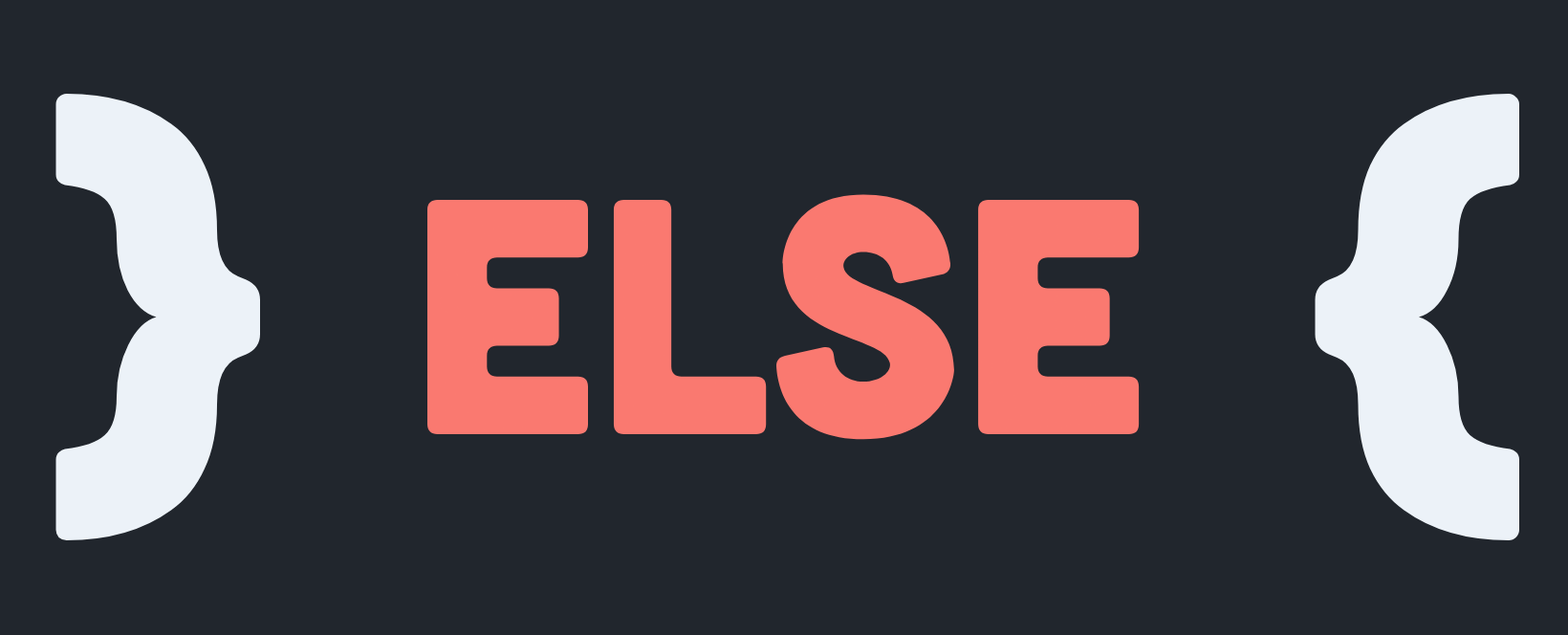
<style>
.page{position:relative;width:1568px;height:635px;background:#21262d}
.page>*{position:absolute;margin:0}
.t1{font:478px "RubikMonoOne-Regular";color:#ecf2f8}
.t2{font:334.6px "Cubano-Regular";color:#fa7970}
</style>
<div class="page">
<p class="t1" style="left:55px;top:94px;width:205px;height:446px">}</p>
<p class="t1" style="left:1315px;top:94px;width:204px;height:446px">{</p>
<p class="t2" style="left:427px;top:194px;width:713px;height:246px">else</p>
</div>
